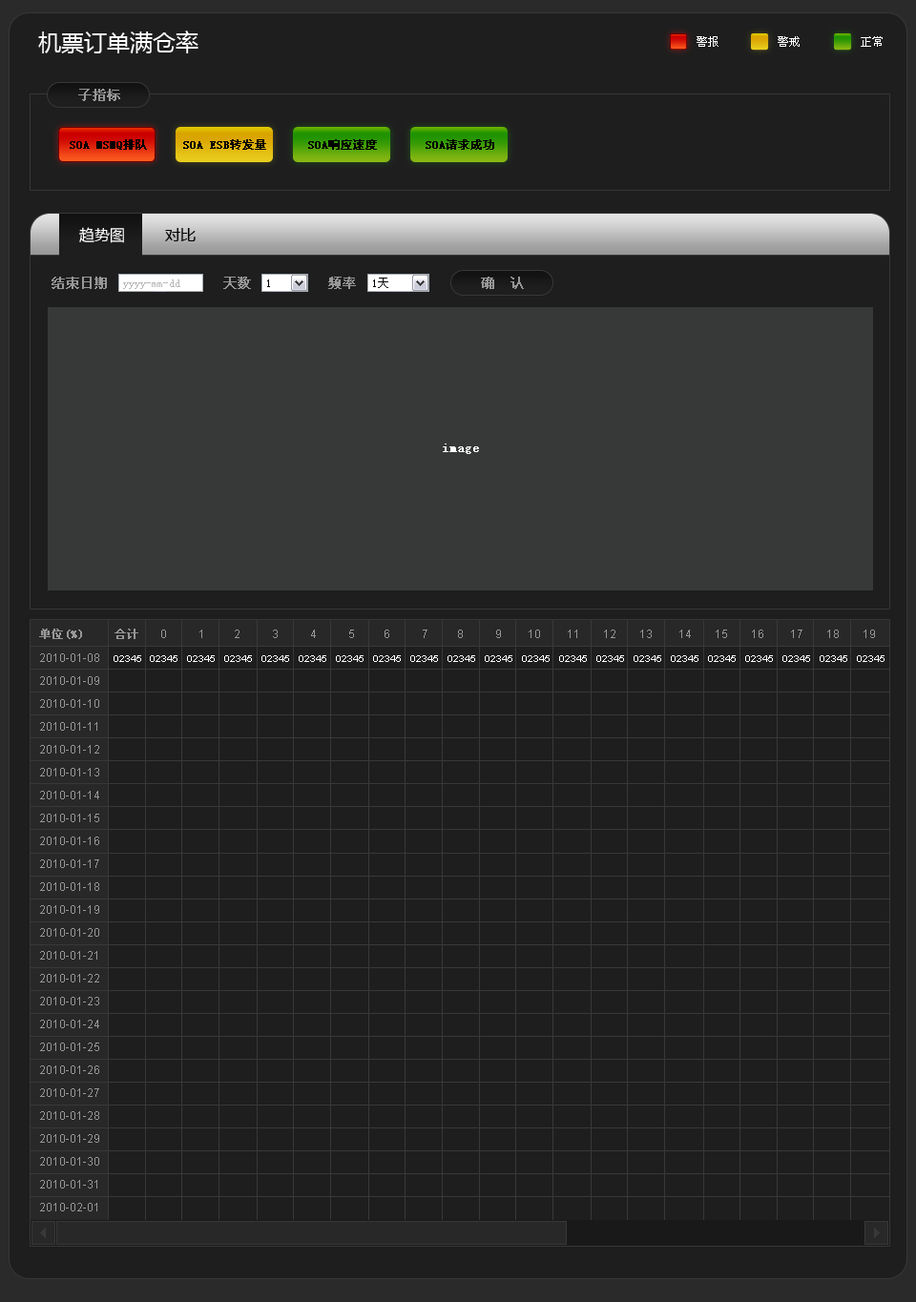
<style>
.page{position:relative;width:916px;height:1302px;background:#1e1e1e}
.page>*{position:absolute;margin:0}
.t1{font:22.9px "MicrosoftYaHei";color:#ffffff}
.t2{font:11.6px "SimSun";color:#ffffff}
.t3{font:13.5px "SimSun";color:#979797;font-weight:bold}
.t4{font:11.7px "SimSun";color:#000000;font-weight:bold}
.t5{font:11.8px "SimSun";color:#000000;font-weight:bold}
.t6{font:15.3px "MicrosoftYaHei";color:#ffffff}
.t7{font:15.3px "MicrosoftYaHei";color:#000000}
.t8{font:13.8px "SimSun";color:#979797;font-weight:bold}
.t9{font:11.7px "SimSun";color:#b9b9b9}
.t10{font:11.7px "SimSun";color:#000000}
.t11{font:11.4px "SimSun";color:#000000}
.t12{font:13.8px "SimSun";color:#ffffff;font-weight:bold}
.t13{font:11.8px "SimSun";color:#979797;font-weight:bold}
.t14{font:11.8px "ArialMT";color:#979797}
.t15{font:11.8px/22.9px "ArialMT";color:#979797}
.t16{font:9.8px "ArialMT";color:#ffffff}
</style>
<div class="page">
<p class="t1" style="left:38px;top:31px;width:160px;height:22px">机票订单满仓率</p>
<p class="t2" style="left:696px;top:36px;width:22px;height:11px">警报</p>
<p class="t2" style="left:777px;top:36px;width:22px;height:11px">警戒</p>
<p class="t2" style="left:860px;top:36px;width:22px;height:11px">正常</p>
<p class="t3" style="left:78px;top:89px;width:42px;height:12px">子指标</p>
<p class="t4" style="left:70px;top:139px;width:77px;height:11px">SOA MSMQ排队</p>
<p class="t5" style="left:183px;top:139px;width:83px;height:11px">SOA ESB转发量</p>
<p class="t4" style="left:308px;top:139px;width:69px;height:11px">SOA响应速度</p>
<p class="t4" style="left:425px;top:139px;width:69px;height:11px">SOA请求成功</p>
<p class="t6" style="left:79px;top:227px;width:45px;height:16px">趋势图</p>
<p class="t6" style="left:79px;top:227px;width:45px;height:16px">趋势图</p>
<p class="t7" style="left:165px;top:228px;width:31px;height:13px">对比</p>
<p class="t8" style="left:52px;top:277px;width:55px;height:12px">结束日期</p>
<p class="t9" style="left:123px;top:280px;width:57px;height:9px">yyyy-mm-dd</p>
<p class="t8" style="left:223px;top:277px;width:28px;height:12px">天数</p>
<p class="t10" style="left:267px;top:280px;width:3px;height:7px">1</p>
<p class="t8" style="left:328px;top:277px;width:28px;height:12px">频率</p>
<p class="t10" style="left:373px;top:278px;width:15px;height:10px">1<span class="t11">天</span></p>
<p class="t8" style="left:481px;top:277px;width:43px;height:12px">确  认</p>
<p class="t12" style="left:443px;top:444px;width:36px;height:10px">image</p>
<p class="t13" style="left:39px;top:629px;width:43px;height:10px">单位(%)</p>
<p class="t13" style="left:114px;top:629px;width:24px;height:10px">合计</p>
<p class="t14" style="left:161px;top:630px;width:714px;height:8px">0           1          2           3           4           5          6           7          8           9         10         11        12        13         14        15        16         17        18        19</p>
<p class="t15" style="left:40px;top:653px;width:59px;height:558px">2010-01-08<br>2010-01-09<br>2010-01-10<br>2010-01-11<br>2010-01-12<br>2010-01-13<br>2010-01-14<br>2010-01-15<br>2010-01-16<br>2010-01-17<br>2010-01-18<br>2010-01-19<br>2010-01-20<br>2010-01-21<br>2010-01-22<br>2010-01-23<br>2010-01-24<br>2010-01-25<br>2010-01-26<br>2010-01-27<br>2010-01-28<br>2010-01-29<br>2010-01-30<br>2010-01-31<br>2010-02-01</p>
<p class="t16" style="left:114px;top:655px;width:27px;height:7px">02345</p>
<p class="t16" style="left:150px;top:655px;width:734px;height:7px">02345   02345   02345   02345   02345   02345   02345   02345   02345   02345   02345   02345   02345   02345   02345   02345   02345   02345   02345   02345</p>
</div>
